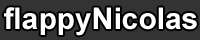
<style>
.page{position:relative;width:200px;height:40px;background:#333333}
.page>*{position:absolute;margin:0}
.t1{font:30px "Arial-BoldMT";color:#ffffff}
</style>
<div class="page">
<p class="t1" style="left:4px;top:7px;width:193px;height:29px">flappyNicolas</p>
</div>
